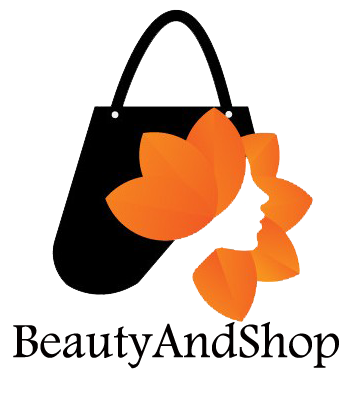
<style>
.page{position:relative;width:350px;height:400px;background:#ffffff}
.page>*{position:absolute;margin:0}
.t1{font:50.8px "FootlightMTLight";color:#030000}
</style>
<div class="page">
<p class="t1" style="left:13px;top:321px;width:326px;height:48px">BeautyAndShop</p>
</div>
